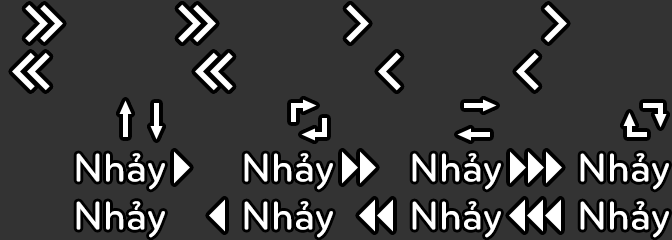
<style>
.page{position:relative;width:672px;height:240px;background:#333333}
.page>*{position:absolute;margin:0}
.t1{font:41px "UTMBryantLGBold";color:#ffffff}
</style>
<div class="page">
<p class="t1" style="left:76px;top:153px;width:89px;height:37px">Nhảy</p>
<p class="t1" style="left:244px;top:153px;width:89px;height:37px">Nhảy</p>
<p class="t1" style="left:412px;top:153px;width:89px;height:37px">Nhảy</p>
<p class="t1" style="left:580px;top:153px;width:89px;height:37px">Nhảy</p>
<p class="t1" style="left:76px;top:201px;width:89px;height:37px">Nhảy</p>
<p class="t1" style="left:244px;top:201px;width:89px;height:37px">Nhảy</p>
<p class="t1" style="left:412px;top:201px;width:89px;height:37px">Nhảy</p>
<p class="t1" style="left:580px;top:201px;width:89px;height:37px">Nhảy</p>
</div>
